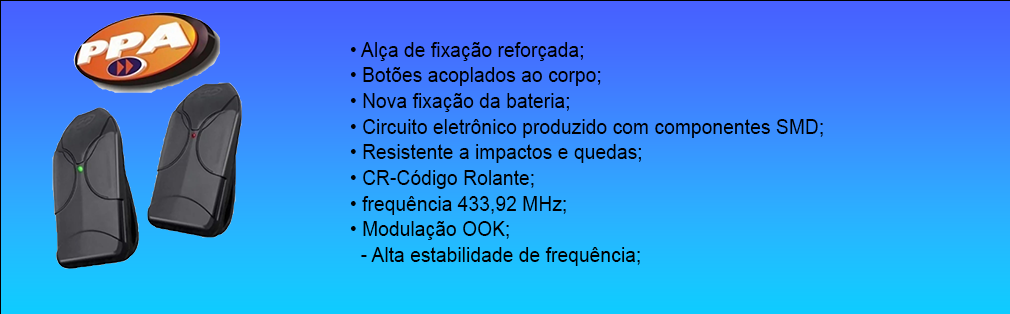
<style>
.page{position:relative;width:1010px;height:314px}
.page>*{position:absolute;margin:0}
.t1{font:21.4px "ArialMT";color:#000000;scale:0.9 1}
</style>
<div class="page">
<p class="t1" style="left:350px;top:42px;width:473px;height:224px">• Alça de fixação reforçada;<br>• Botões acoplados ao corpo;<br>• Nova fixação da bateria;<br>• Circuito eletrônico produzido com componentes SMD;<br>• Resistente a impactos e quedas;<br>• CR-Código Rolante;<br>• frequência 433,92 MHz;<br>• Modulação OOK;<br>  - Alta estabilidade de frequência;<br>  - Proteção contra acionamento involuntário.</p>
</div>
